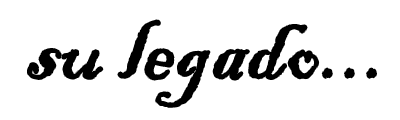
<style>
.page{position:relative;width:400px;height:120px;background:#ffffff}
.page>*{position:absolute;margin:0}
.t1{font:100px "BlackadderITC-Regular";color:#000000}
</style>
<div class="page">
<p class="t1" style="left:28px;top:20px;width:348px;height:87px">su legado...</p>
</div>
